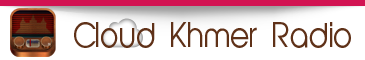
<style>
.page{position:relative;width:365px;height:60px;background:#ffffff}
.page>*{position:absolute;margin:0}
.t1{font:31.9px "AbeatbyKai";color:#5f3118;scale:0.91 1}
</style>
<div class="page">
<p class="t1" style="left:74px;top:22px;width:277px;height:26px">Cloud Khmer Radio</p>
</div>
